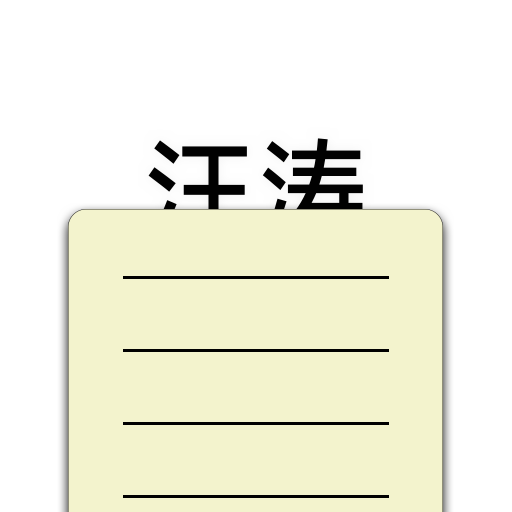
<style>
.page{position:relative;width:512px;height:512px;background:#ffffff}
.page>*{position:absolute;margin:0}
.t1{font:113.3px "MiSans-Medium";color:#010101}
</style>
<div class="page">
<p class="t1" style="left:148px;top:138px;width:215px;height:105px">汪涛</p>
</div>
